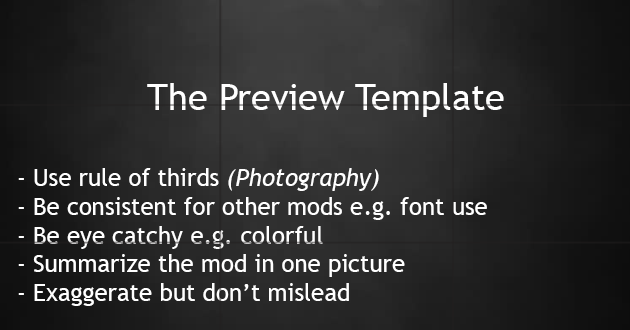
<style>
.page{position:relative;width:630px;height:330px}
.page>*{position:absolute;margin:0}
.t1{font:36px "TrebuchetMS";color:#ffffff}
.t2{font:24px "TrebuchetMS";color:#ffffff}
.t3{font:24px "TrebuchetMS-Italic";color:#ffffff}
</style>
<div class="page">
<p class="t1" style="left:147px;top:83px;width:357px;height:34px">The Preview Template</p>
<p class="t2" style="left:18px;top:168px;width:469px;height:138px">- Use rule of thirds <span class="t3">(Photography)<br></span>- Be consistent for other mods e.g. font use<br>- Be eye catchy e.g. colorful <br>- Summarize the mod in one picture<br>- Exaggerate but don’t mislead</p>
</div>
